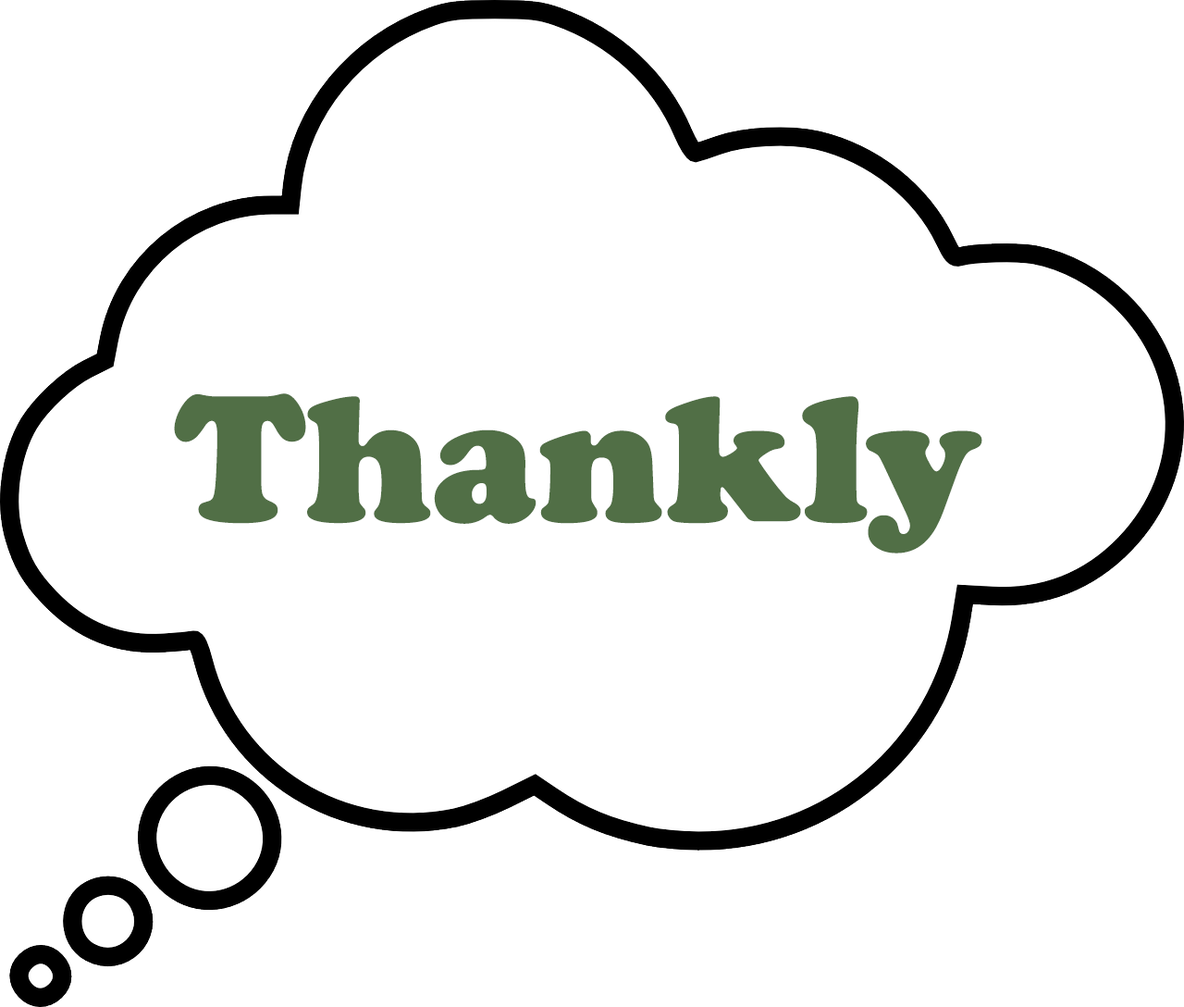
<style>
.page{position:relative;width:1184px;height:1007px;background:#ffffff}
.page>*{position:absolute;margin:0}
.t1{font:186.9px "CooperBlack";color:#516f46}
</style>
<div class="page">
<p class="t1" style="left:174px;top:393px;width:809px;height:160px">Thankly</p>
</div>
